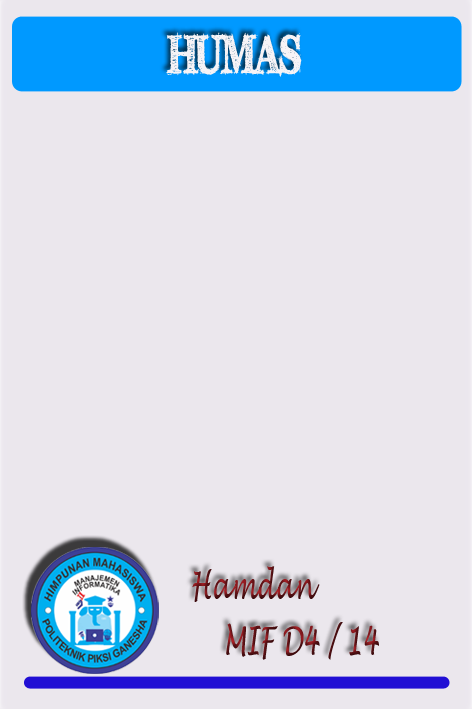
<style>
.page{position:relative;width:472px;height:709px;background:#ebe7ed}
.page>*{position:absolute;margin:0}
.t1{font:54.2px "FFFTusj-Bold";color:#f6f3f6;scale:0.64 1}
.t2{font:37.5px "LucidaHandwriting-Italic";scale:0.64 1}
</style>
<div class="page">
<p class="t1" style="left:166px;top:32px;width:136px;height:45px">HUMAS</p>
<p class="t2" style="left:192px;top:566px;width:128px;height:36px">Hamdan</p>
<p class="t2" style="left:226px;top:622px;width:153px;height:38px">MIF D4 / 14</p>
</div>
